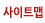
<style>
.page{position:relative;width:45px;height:23px;background:#ffffff}
.page>*{position:absolute;margin:0}
.t1{font:12px "NanumGothicBold";color:#ae1c17;font-weight:bold;scale:0.87 1}
</style>
<div class="page">
<p class="t1" style="left:3px;top:6px;width:40px;height:12px">사이트맵</p>
</div>
